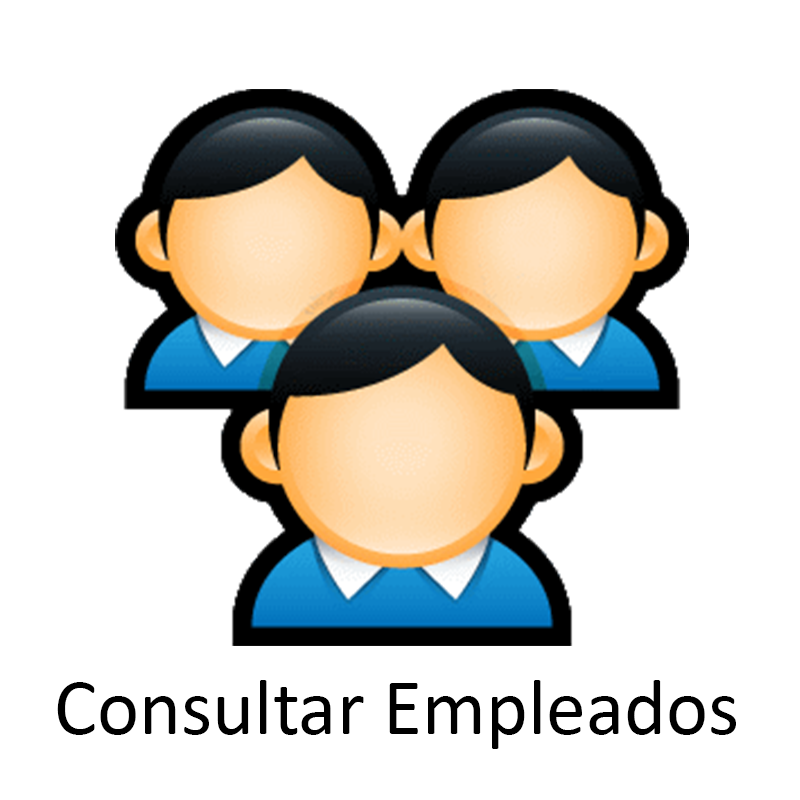
<style>
.page{position:relative;width:800px;height:800px;background:#ffffff}
.page>*{position:absolute;margin:0}
.t1{font:80px "Calibri";color:#000000}
</style>
<div class="page">
<p class="t1" style="left:57px;top:680px;width:679px;height:69px">Consultar Empleados</p>
</div>
